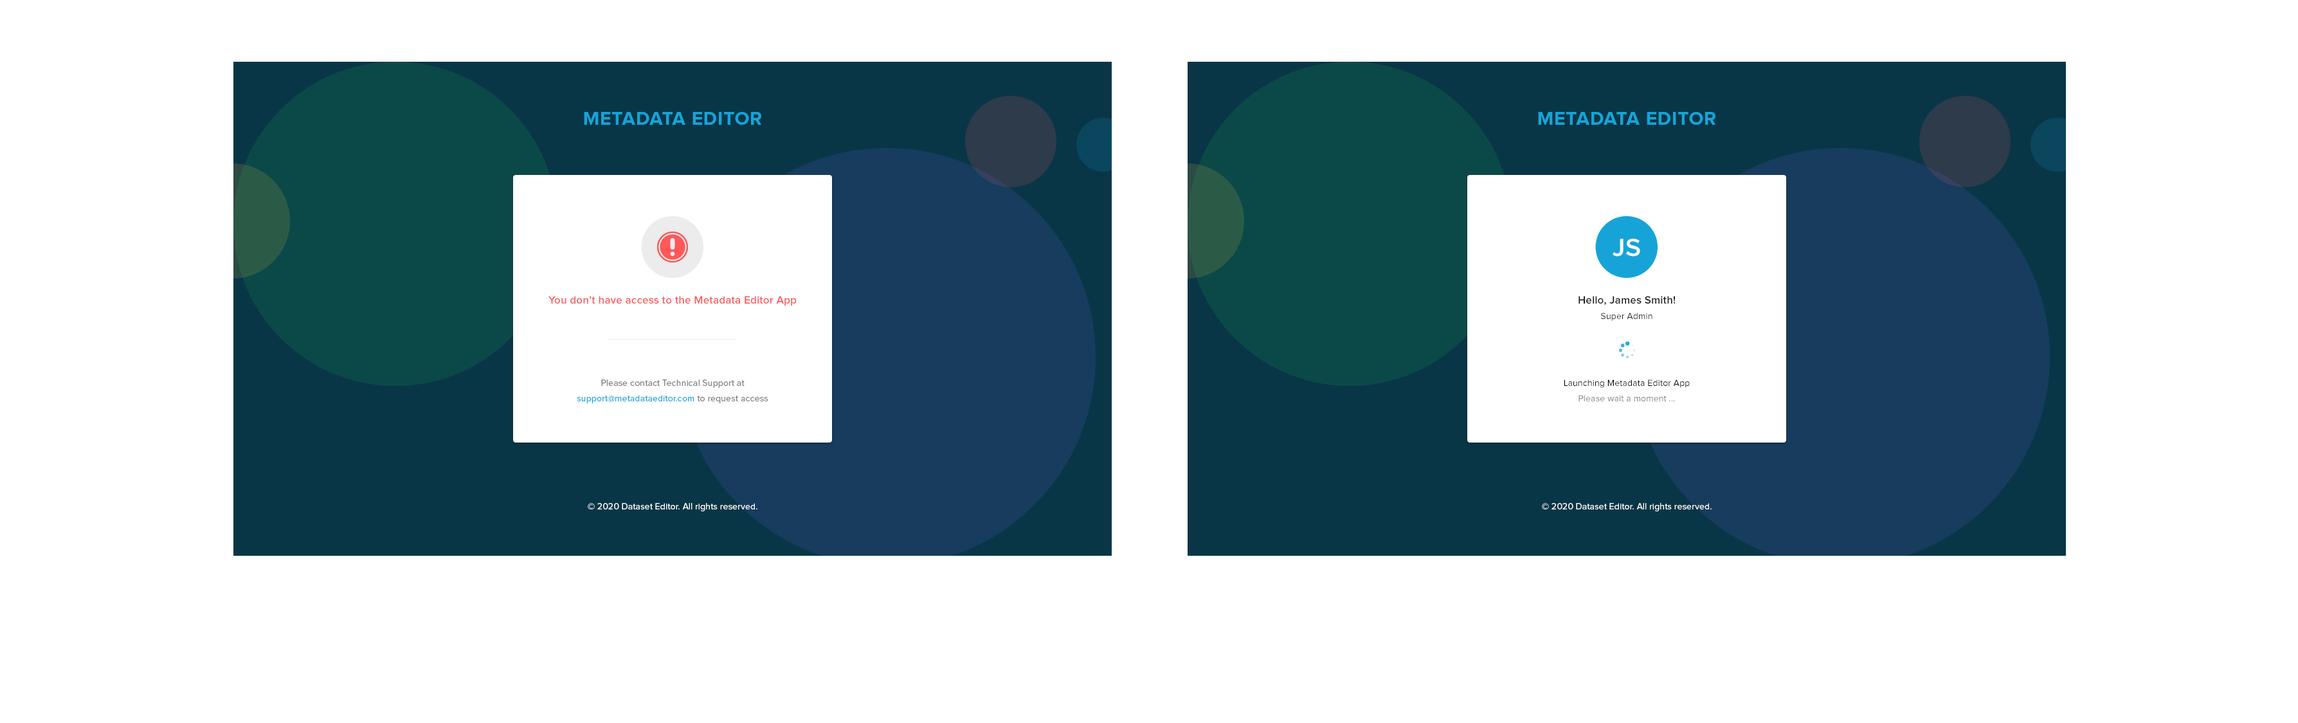
<style>
.page{position:relative;width:2298px;height:723px;background:#ffffff}
.page>*{position:absolute;margin:0}
.t1{font:19.3px "ProximaNova-Bold";letter-spacing:0.025em;color:#16a4d8;text-transform:uppercase}
.t2{font:25.7px "ProximaNova-Semibold";letter-spacing:0.01em;color:#ffffff}
.t3{font:10.9px "ProximaNova-Semibold";letter-spacing:0.01em;color:#ff5858}
.t4{font:10.9px "ProximaNova-Semibold";letter-spacing:0.01em;color:#212121}
.t5{font:9px "ProximaNova-Regular";letter-spacing:0.01em;color:#212121}
.t6{font:9px/15.4px "ProximaNova-Regular";letter-spacing:0.01em;color:#7c7c7c}
.t7{font:9px/15.4px "ProximaNova-Regular";letter-spacing:0.01em;color:#16a4d8}
.t8{font:9px "ProximaNova-Regular";letter-spacing:0.01em;color:#000000}
.t9{font:9px "ProximaNova-Regular";letter-spacing:0.01em;color:#7c7c7c}
.t10{font:9px "ProximaNova-Regular";letter-spacing:0.01em;color:#ffffff}
</style>
<div class="page">
<p class="t1" style="left:584px;top:112px;width:177px;height:13px">Metadata Editor</p>
<p class="t1" style="left:1538px;top:112px;width:177px;height:13px">Metadata Editor</p>
<p class="t2" style="left:1612px;top:239px;width:28px;height:17px">JS</p>
<p class="t3" style="left:548px;top:296px;width:249px;height:10px">You don’t have access to the Metadata Editor App</p>
<p class="t4" style="left:1578px;top:296px;width:97px;height:9px">Hello, James Smith!</p>
<p class="t5" style="left:1601px;top:312px;width:51px;height:9px">Super Admin</p>
<p class="t6" style="left:577px;top:379px;width:191px;height:24px;text-align:center">Please contact Technical Support at<br><span class="t7">support@metadataeditor.com </span>to request access</p>
<p class="t8" style="left:1563px;top:379px;width:126px;height:9px">Launching Metadata Editor App</p>
<p class="t9" style="left:1578px;top:395px;width:97px;height:6px">Please wait a moment ...</p>
<p class="t10" style="left:588px;top:503px;width:169px;height:8px">© 2020 Dataset Editor. All rights reserved.</p>
<p class="t10" style="left:1542px;top:503px;width:169px;height:8px">© 2020 Dataset Editor. All rights reserved.</p>
</div>
